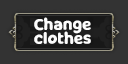
<style>
.page{position:relative;width:128px;height:64px;background:#333333}
.page>*{position:absolute;margin:0}
.t1{font:16px/14px "MilkyNiceClean";color:#fdfdfd}
</style>
<div class="page">
<p class="t1" style="left:34px;top:17px;width:57px;height:27px">Change<br>clothes</p>
</div>
